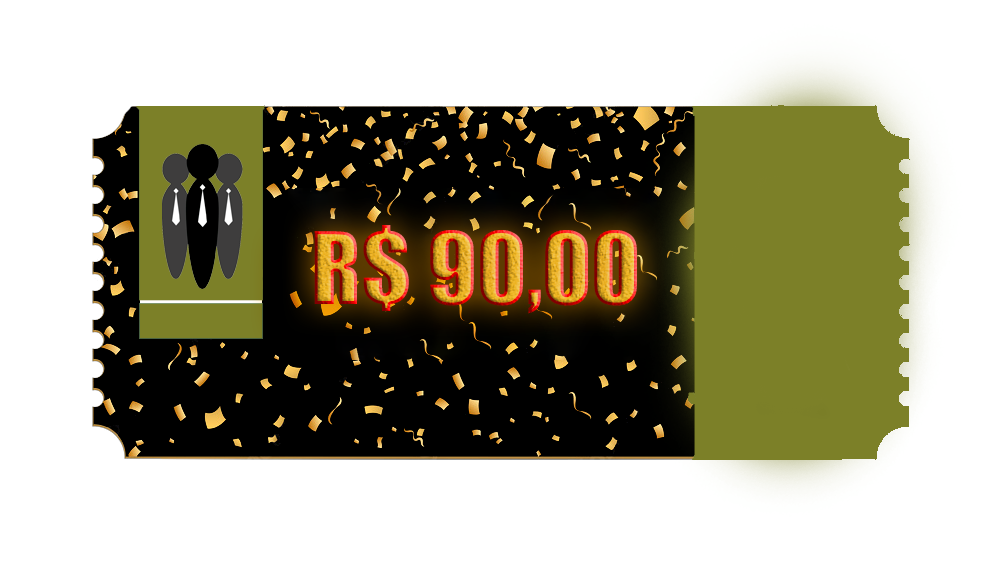
<style>
.page{position:relative;width:1000px;height:579px;background:#ffffff}
.page>*{position:absolute;margin:0}
.t1{font:92px "Impact";text-transform:uppercase}
</style>
<div class="page">
<p class="t1" style="left:314px;top:225px;width:323px;height:89px">r$ 90,00</p>
</div>
